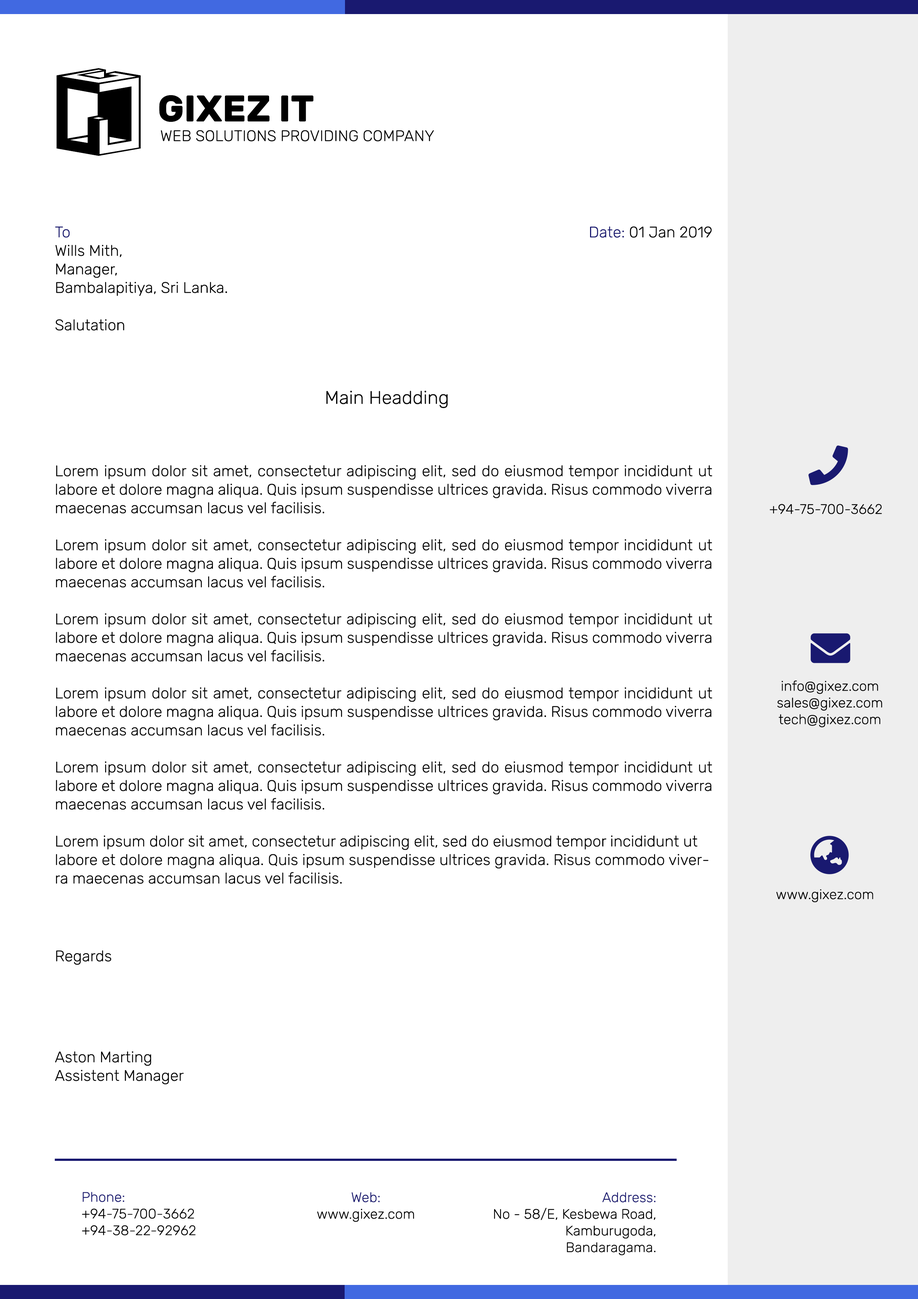
<style>
.page{position:relative;width:918px;height:1299px;background:#ffffff}
.page>*{position:absolute;margin:0}
.t1{font:93.5px "D3-Cubism";color:#000000}
.t2{font:37px "Rubik-Bold";color:#000000}
.t3{font:15.4px "Rubik-Light";color:#000000}
.t4{font:15.4px "Rubik-Light";color:#191970}
.t5{font:18.5px "Rubik-Light";color:#000000}
.t6{font:13.9px "Rubik-Light";color:#000000}
.t7{font:13.9px "Rubik-Light";color:#020202}
.t8{font:13.9px "Rubik-Light";color:#191970}
</style>
<div class="page">
<p class="t1" style="left:56px;top:68px;width:85px;height:88px">g</p>
<p class="t2" style="left:159px;top:95px;width:155px;height:27px">GIXEZ IT</p>
<p class="t3" style="left:161px;top:130px;width:273px;height:11px">WEB SOLUTIONS PROVIDING COMPANY</p>
<p class="t3" style="left:55px;top:226px;width:172px;height:70px"><span class="t4">To</span><br>Wills Mith,<br>Manager,<br>Bambalapitiya, Sri Lanka.</p>
<p class="t3" style="left:590px;top:226px;width:122px;height:12px"><span class="t4">Date:</span> 01 Jan 2019</p>
<p class="t3" style="left:56px;top:319px;width:68px;height:12px">Salutation</p>
<p class="t5" style="left:326px;top:391px;width:122px;height:17px">Main Headding</p>
<p class="t3" style="left:56px;top:465px;width:656px;height:419px;text-align:justify">Lorem ipsum dolor sit amet, consectetur adipiscing elit, sed do eiusmod tempor incididunt ut labore et dolore magna aliqua. Quis ipsum suspendisse ultrices gravida. Risus commodo viverra maecenas accumsan lacus vel facilisis. <br><br>Lorem ipsum dolor sit amet, consectetur adipiscing elit, sed do eiusmod tempor incididunt ut labore et dolore magna aliqua. Quis ipsum suspendisse ultrices gravida. Risus commodo viverra maecenas accumsan lacus vel facilisis. <br><br>Lorem ipsum dolor sit amet, consectetur adipiscing elit, sed do eiusmod tempor incididunt ut labore et dolore magna aliqua. Quis ipsum suspendisse ultrices gravida. Risus commodo viverra maecenas accumsan lacus vel facilisis. <br><br>Lorem ipsum dolor sit amet, consectetur adipiscing elit, sed do eiusmod tempor incididunt ut labore et dolore magna aliqua. Quis ipsum suspendisse ultrices gravida. Risus commodo viverra maecenas accumsan lacus vel facilisis. <br><br>Lorem ipsum dolor sit amet, consectetur adipiscing elit, sed do eiusmod tempor incididunt ut labore et dolore magna aliqua. Quis ipsum suspendisse ultrices gravida. Risus commodo viverra maecenas accumsan lacus vel facilisis. <br><br>Lorem ipsum dolor sit amet, consectetur adipiscing elit, sed do eiusmod tempor incididunt ut labore et dolore magna aliqua. Quis ipsum suspendisse ultrices gravida. Risus commodo viverra maecenas accumsan lacus vel facilisis.</p>
<p class="t6" style="left:770px;top:504px;width:112px;height:10px">+94-75-700-3662</p>
<p class="t6" style="left:777px;top:680px;width:105px;height:47px;text-align:center">info@gixez.com<br>sales@gixez.com<br>tech@gixez.com</p>
<p class="t6" style="left:776px;top:889px;width:97px;height:13px">www.gixez.com</p>
<p class="t3" style="left:56px;top:950px;width:55px;height:15px">Regards</p>
<p class="t3" style="left:55px;top:1051px;width:129px;height:33px">Aston Marting<br>Assistent Manager</p>
<p class="t7" style="left:82px;top:1191px;width:114px;height:44px"><span class="t8">Phone:<br></span>+94-75-700-3662<br>+94-38-22-92962</p>
<p class="t6" style="left:317px;top:1192px;width:97px;height:30px;text-align:center"><span class="t8">Web:<br></span>www.gixez.com</p>
<p class="t6" style="left:494px;top:1192px;width:162px;height:63px;text-align:right"><span class="t8">Address:<br></span>No - 58/E, Kesbewa Road,<br>Kamburugoda,<br>Bandaragama.</p>
</div>
